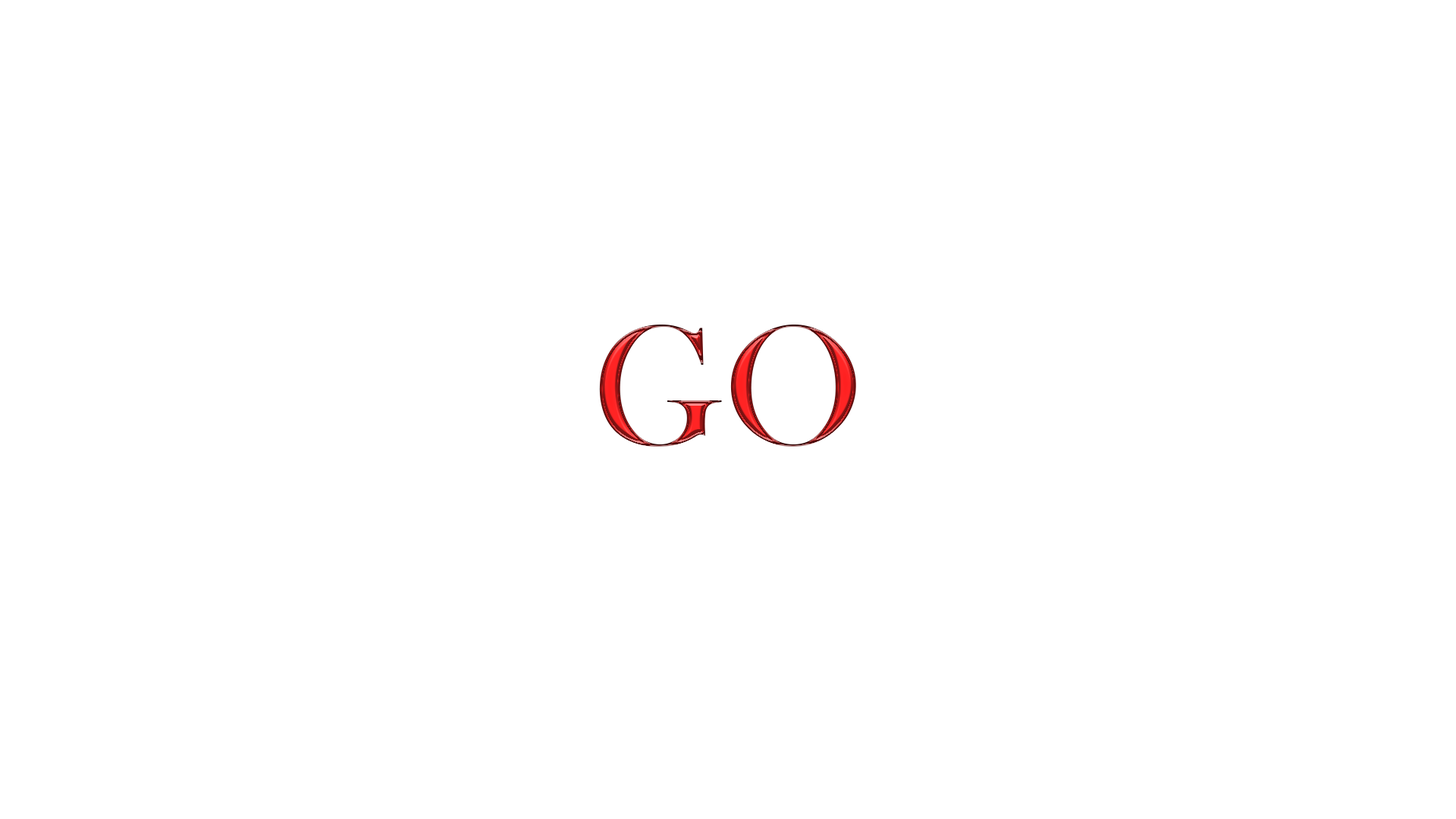
<style>
.page{position:relative;width:1456px;height:819px;background:#ffffff}
.page>*{position:absolute;margin:0}
.t1{font:174.4px "BaskOldFace"}
</style>
<div class="page">
<p class="t1" style="left:599px;top:325px;width:257px;height:122px">GO</p>
</div>
